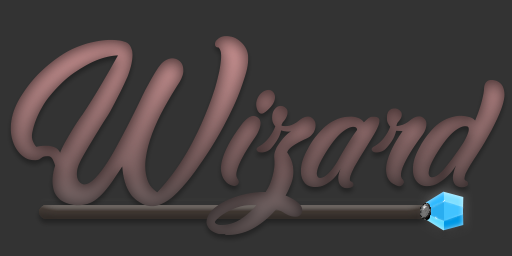
<style>
.page{position:relative;width:512px;height:256px;background:#333333}
.page>*{position:absolute;margin:0}
.t1{font:132px "Reality-Sunday-light"}
.t2{font:176px "Reality-Sunday-light"}
</style>
<div class="page">
<p class="t1" style="left:10px;top:36px;width:495px;height:199px"><span class="t2">W</span>izard</p>
</div>
